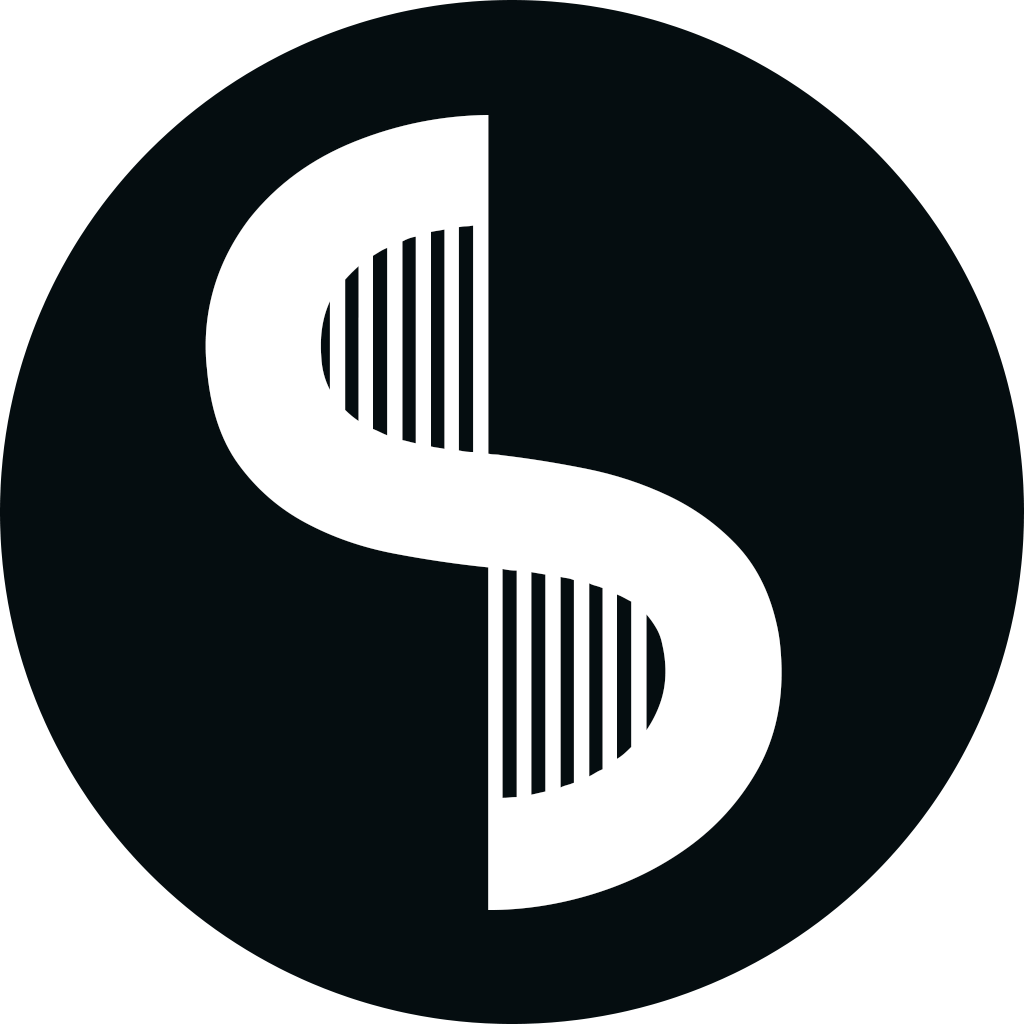
<style>
.page{position:relative;width:1024px;height:1024px;background:#050d10}
.page>*{position:absolute;margin:0}
.t1{font:795px "SANDRE-Regular";color:#ffffff}
</style>
<div class="page">
<p class="t1" style="left:205px;top:115px;width:577px;height:795px">S</p>
</div>
